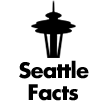
<style>
.page{position:relative;width:108px;height:108px;background:#ffffff}
.page>*{position:absolute;margin:0}
.t1{font:20.8px "FuturaLT-Bold";letter-spacing:-0.025em;color:#000000}
</style>
<div class="page">
<p class="t1" style="left:19px;top:60px;width:70px;height:19px">Seattle</p>
<p class="t1" style="left:28px;top:84px;width:50px;height:17px">Facts</p>
</div>
